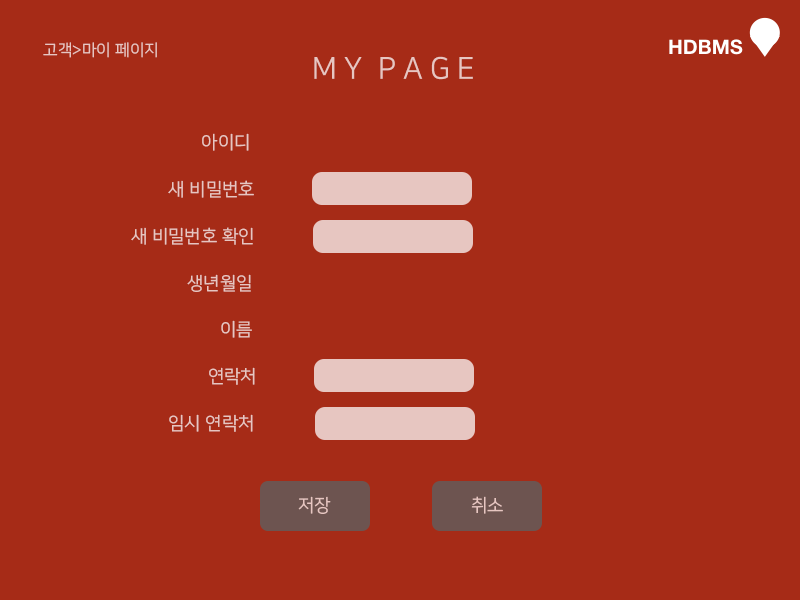
<style>
.page{position:relative;width:800px;height:600px;background:#a62b17}
.page>*{position:absolute;margin:0}
.t1{font:16px "NanumSquareOTFR";color:#e7c6c1}
.t2{font:30px "NanumSquareOTFR";color:#e7c6c1}
.t3{font:18px "NanumSquareOTFR";color:#e7c6c1}
</style>
<div class="page">
<p class="t1" style="left:43px;top:42px;width:114px;height:16px">고객&gt;마이 페이지</p>
<p class="t2" style="left:314px;top:56px;width:159px;height:24px">M Y  P A G E</p>
<p class="t3" style="left:202px;top:133px;width:47px;height:18px">아이디</p>
<p class="t3" style="left:168px;top:180px;width:86px;height:18px">새 비밀번호</p>
<p class="t3" style="left:131px;top:227px;width:122px;height:18px">새 비밀번호 확인</p>
<p class="t3" style="left:187px;top:274px;width:64px;height:18px">생년월일</p>
<p class="t3" style="left:221px;top:320px;width:31px;height:18px">이름</p>
<p class="t3" style="left:209px;top:367px;width:46px;height:18px">연락처</p>
<p class="t3" style="left:169px;top:414px;width:84px;height:18px">임시 연락처</p>
<p class="t3" style="left:298px;top:496px;width:33px;height:18px">저장</p>
<p class="t3" style="left:471px;top:496px;width:32px;height:18px">취소</p>
</div>
